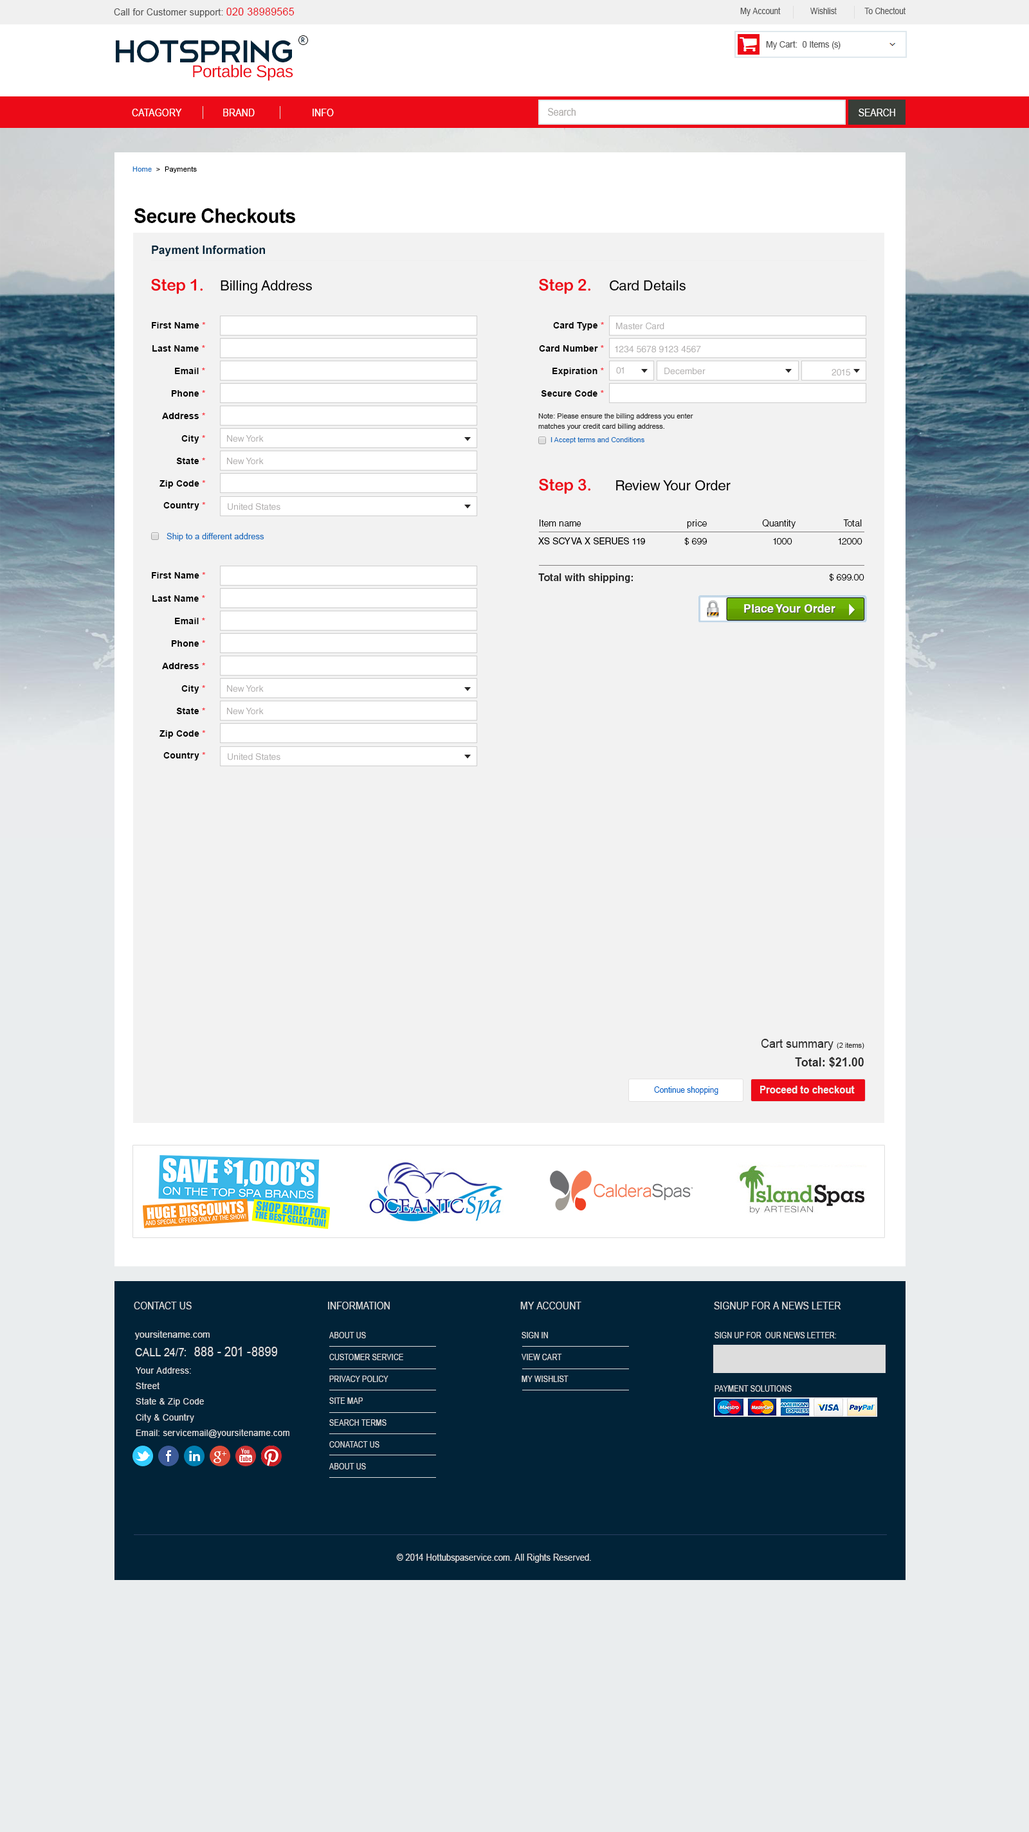
<style>
.page{position:relative;width:1029px;height:1832px;background:#f2f2f2}
.page>*{position:absolute;margin:0}
.t1{font:9.5px "ArialMT";letter-spacing:0.02em;color:#555555;scale:0.95 1}
.t2{font:10.8px "ArialMT";letter-spacing:0.02em;color:#ec0a17;scale:0.95 1}
.t3{font:8.9px "ArialMT";color:#555555;scale:0.87 1}
.t4{font:41.2px "Telegrafico";letter-spacing:-0.08em;color:#012338}
.t5{font:6.8px "HarmoniaSansStd-Regular";letter-spacing:0.03em;color:#012338}
.t6{font:8.8px "ArialMT";color:#555555;scale:0.95 1}
.t7{font:17px "LiberationSans";letter-spacing:-0.02em;color:#ec0a17}
.t8{font:10.3px "ArialMT";letter-spacing:0.01em;color:#ffffff;scale:0.87 1}
.t9{font:10.3px "ArialMT";color:#aeaba9;scale:0.87 1}
.t10{font:10.3px "ArialMT";color:#ffffff;scale:0.87 1}
.t11{font:7.1px "ArialMT";letter-spacing:0.02em;color:#000000}
.t12{font:7.1px "ArialMT";letter-spacing:0.02em;color:#1d70c0}
.t13{font:20.3px "Arial-BoldMT";letter-spacing:-0.02em;color:#000000;scale:0.95 1}
.t14{font:11.6px "Arial-BoldMT";color:#012338}
.t15{font:16.1px "ArialRoundedMTBold";letter-spacing:-0.01em;color:#ec0a17}
.t16{font:14.1px "HelveticaLTStd-Roman";color:#000000}
.t17{font:9px "Arial-BoldMT";letter-spacing:0.02em;color:#000000}
.t18{font:9px "Arial-BoldMT";letter-spacing:0.02em;color:#f92834}
.t19{font:9px "HelveticaLTStd-Roman";color:#afadad}
.t20{font:7.1px/5.1px "ArialMT";color:#292929}
.t21{font:7.1px "ArialMT";color:#1d70c0}
.t22{font:9px "HelveticaLTStd-Light";color:#000000}
.t23{font:8.4px "ArialMT";color:#1d70c0}
.t24{font:9px "HelveticaLTStd-Roman";color:#000000}
.t25{font:10.3px "HelveticaLTStd-Bold";color:#292929}
.t26{font:11.6px "HelveticaLTStd-Bold";color:#ffffff}
.t27{font:11.6px "HelveticaLTStd-Bold"}
.t28{font:12.2px "ArialMT";color:#292929;scale:0.95 1}
.t29{font:7.1px "ArialMT";color:#292929}
.t30{font:12.2px "Arial-BoldMT";color:#292929;scale:0.95 1}
.t31{font:10.1px "Arial-BoldMT";color:#f0f0f0;scale:0.95 1}
.t32{font:8.1px "ArialMT";color:#0064c8;scale:0.95 1}
.t33{font:10.3px "ArialMT";letter-spacing:0.01em;color:#dddddd;scale:0.87 1}
.t34{font:9.8px "ArialMT";letter-spacing:0.03em;color:#dddddd;scale:0.9 1}
.t35{font:8.1px/21.9px "ArialMT";letter-spacing:0.01em;color:#dddddd;scale:0.87 1}
.t36{font:8.1px "ArialMT";letter-spacing:0.01em;color:#dddddd;scale:0.87 1}
.t37{font:13.3px "ArialMT";letter-spacing:0.01em;color:#dddddd;scale:0.87 1}
.t38{font:11.8px "ArialMT";letter-spacing:0.01em;color:#dddddd;scale:0.87 1}
.t39{font:9.1px/15.5px "ArialMT";letter-spacing:0.03em;color:#dddddd;scale:0.94 1}
.t40{font:9.6px "ArialMT";letter-spacing:0.01em;color:#dddddd;scale:0.87 1}
</style>
<div class="page">
<p class="t1" style="left:114px;top:8px;width:180px;height:9px">Call for Customer support: <span class="t2">020 38989565</span></p>
<p class="t3" style="left:740px;top:7px;width:165px;height:9px">My Account              Wishlist             To Chectout</p>
<p class="t4" style="left:116px;top:40px;width:176px;height:22px">HotSpring</p>
<p class="t5" style="left:301px;top:37px;width:4px;height:5px">R</p>
<p class="t6" style="left:766px;top:40px;width:74px;height:10px">My Cart:  0 Items (s)</p>
<p class="t7" style="left:193px;top:64px;width:100px;height:17px">Portable Spas</p>
<p class="t8" style="left:132px;top:109px;width:202px;height:7px">CATAGORY                BRAND                      INFO</p>
<p class="t9" style="left:548px;top:108px;width:27px;height:8px">Search</p>
<p class="t10" style="left:858px;top:109px;width:37px;height:7px">SEARCH</p>
<p class="t11" style="left:132px;top:166px;width:65px;height:7px"><span class="t12">Home </span> &gt;  Payments</p>
<p class="t13" style="left:134px;top:208px;width:161px;height:15px">Secure Checkouts</p>
<p class="t14" style="left:152px;top:245px;width:113px;height:11px">Payment Information</p>
<p class="t15" style="left:151px;top:278px;width:52px;height:16px">Step 1.</p>
<p class="t16" style="left:221px;top:280px;width:91px;height:14px">Billing Address</p>
<p class="t15" style="left:539px;top:278px;width:51px;height:16px">Step 2.</p>
<p class="t16" style="left:609px;top:280px;width:76px;height:11px">Card Details</p>
<p class="t17" style="left:152px;top:322px;width:54px;height:6px">First Name <span class="t18">*</span></p>
<p class="t17" style="left:553px;top:322px;width:51px;height:8px">Card Type <span class="t18">*</span></p>
<p class="t19" style="left:616px;top:322px;width:48px;height:8px">Master Card</p>
<p class="t17" style="left:152px;top:345px;width:53px;height:7px">Last Name <span class="t18">*</span></p>
<p class="t17" style="left:539px;top:345px;width:65px;height:7px">Card Number <span class="t18">*</span></p>
<p class="t19" style="left:615px;top:346px;width:86px;height:7px">1234 5678 9123 4567</p>
<p class="t17" style="left:175px;top:368px;width:30px;height:6px">Email <span class="t18">*</span></p>
<p class="t17" style="left:552px;top:368px;width:52px;height:8px">Expiration <span class="t18">*</span></p>
<p class="t19" style="left:616px;top:367px;width:8px;height:7px">01</p>
<p class="t19" style="left:664px;top:368px;width:41px;height:7px">December</p>
<p class="t19" style="left:831px;top:369px;width:19px;height:7px">2015</p>
<p class="t17" style="left:171px;top:390px;width:34px;height:7px">Phone <span class="t18">*</span></p>
<p class="t17" style="left:541px;top:390px;width:63px;height:7px">Secure Code <span class="t18">*</span></p>
<p class="t17" style="left:162px;top:413px;width:43px;height:6px">Address <span class="t18">*</span></p>
<p class="t20" style="left:538px;top:413px;width:155px;height:17px">Note: Please ensure the billing address you enter<br>matches your credit card billing address.</p>
<p class="t17" style="left:181px;top:435px;width:24px;height:9px">City <span class="t18">*</span></p>
<p class="t19" style="left:227px;top:435px;width:37px;height:7px">New York</p>
<p class="t21" style="left:550px;top:437px;width:94px;height:7px">I Accept terms and Conditions</p>
<p class="t17" style="left:176px;top:458px;width:29px;height:6px">State <span class="t18">*</span></p>
<p class="t19" style="left:227px;top:458px;width:37px;height:7px">New York</p>
<p class="t17" style="left:159px;top:480px;width:47px;height:9px">Zip Code <span class="t18">*</span></p>
<p class="t15" style="left:539px;top:478px;width:51px;height:16px">Step 3.</p>
<p class="t16" style="left:616px;top:480px;width:114px;height:11px">Review Your Order</p>
<p class="t17" style="left:163px;top:502px;width:43px;height:8px">Country <span class="t18">*</span></p>
<p class="t19" style="left:228px;top:503px;width:52px;height:7px">United States</p>
<p class="t22" style="left:539px;top:519px;width:322px;height:9px">Item name                                          price                      Quantity                   Total</p>
<p class="t23" style="left:166px;top:533px;width:98px;height:8px">Ship to a different address</p>
<p class="t24" style="left:538px;top:537px;width:107px;height:7px">XS SCYVA X SERUES 119</p>
<p class="t22" style="left:684px;top:537px;width:178px;height:9px">$ 699                          1000                  12000</p>
<p class="t17" style="left:152px;top:572px;width:54px;height:7px">First Name <span class="t18">*</span></p>
<p class="t25" style="left:538px;top:573px;width:95px;height:10px">Total with shipping:</p>
<p class="t22" style="left:829px;top:573px;width:35px;height:9px">$ 699.00</p>
<p class="t17" style="left:152px;top:595px;width:53px;height:7px">Last Name <span class="t18">*</span></p>
<p class="t26" style="left:744px;top:604px;width:91px;height:9px">Place Your Order</p>
<p class="t27" style="left:744px;top:605px;width:92px;height:8px">Place Your Order</p>
<p class="t17" style="left:175px;top:618px;width:30px;height:6px">Email <span class="t18">*</span></p>
<p class="t17" style="left:171px;top:640px;width:34px;height:7px">Phone <span class="t18">*</span></p>
<p class="t17" style="left:162px;top:663px;width:43px;height:6px">Address <span class="t18">*</span></p>
<p class="t17" style="left:181px;top:685px;width:24px;height:9px">City <span class="t18">*</span></p>
<p class="t19" style="left:227px;top:685px;width:37px;height:7px">New York</p>
<p class="t17" style="left:176px;top:708px;width:29px;height:6px">State <span class="t18">*</span></p>
<p class="t19" style="left:227px;top:708px;width:37px;height:7px">New York</p>
<p class="t17" style="left:159px;top:730px;width:47px;height:9px">Zip Code <span class="t18">*</span></p>
<p class="t17" style="left:163px;top:752px;width:43px;height:8px">Country <span class="t18">*</span></p>
<p class="t19" style="left:228px;top:753px;width:52px;height:7px">United States</p>
<p class="t28" style="left:760px;top:1039px;width:73px;height:11px">Cart summary</p>
<p class="t29" style="left:836px;top:1043px;width:28px;height:6px">(2 items)</p>
<p class="t30" style="left:795px;top:1057px;width:68px;height:11px">Total: $21.00</p>
<p class="t31" style="left:760px;top:1086px;width:94px;height:8px">Proceed to checkout</p>
<p class="t32" style="left:654px;top:1086px;width:64px;height:9px">Continue shopping</p>
<p class="t33" style="left:134px;top:1302px;width:58px;height:8px">CONTACT US</p>
<p class="t33" style="left:328px;top:1302px;width:62px;height:8px">INFORMATION</p>
<p class="t33" style="left:520px;top:1302px;width:61px;height:8px">MY ACCOUNT</p>
<p class="t33" style="left:714px;top:1302px;width:127px;height:8px">SIGNUP FOR A NEWS LETER</p>
<p class="t34" style="left:134px;top:1331px;width:76px;height:9px">yoursitename.com</p>
<p class="t35" style="left:329px;top:1332px;width:74px;height:138px;text-align:justify">ABOUT US<br>CUSTOMER SERVICE<br>PRIVACY POLICY <br>SITE MAP<br>SEARCH TERMS<br>CONATACT US<br>ABOUT US</p>
<p class="t35" style="left:521px;top:1332px;width:47px;height:50px;text-align:justify">SIGN IN<br>VIEW CART<br>MY WISHLIST</p>
<p class="t36" style="left:714px;top:1332px;width:122px;height:6px">SIGN UP FOR  OUR NEWS LETTER:</p>
<p class="t37" style="left:135px;top:1347px;width:142px;height:9px"><span class="t38">CALL 24/7:  </span>888 - 201 -8899</p>
<p class="t39" style="left:136px;top:1367px;width:153px;height:71px;text-align:justify">Your Address:<br>Street<br>State &amp; Zip Code<br>City &amp; Country <br>Email: servicemail@yoursitename.com</p>
<p class="t36" style="left:714px;top:1385px;width:77px;height:7px">PAYMENT SOLUTIONS</p>
<p class="t40" style="left:396px;top:1554px;width:195px;height:9px">© 2014 Hottubspaservice.com. All Rights Reserved.</p>
</div>
